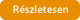
<style>
.page{position:relative;width:80px;height:20px;background:#e68d00}
.page>*{position:absolute;margin:0}
.t1{font:11px "MyriadPro-Semibold";color:#ffffff}
</style>
<div class="page">
<p class="t1" style="left:13px;top:5px;width:55px;height:8px">Részletesen</p>
</div>
